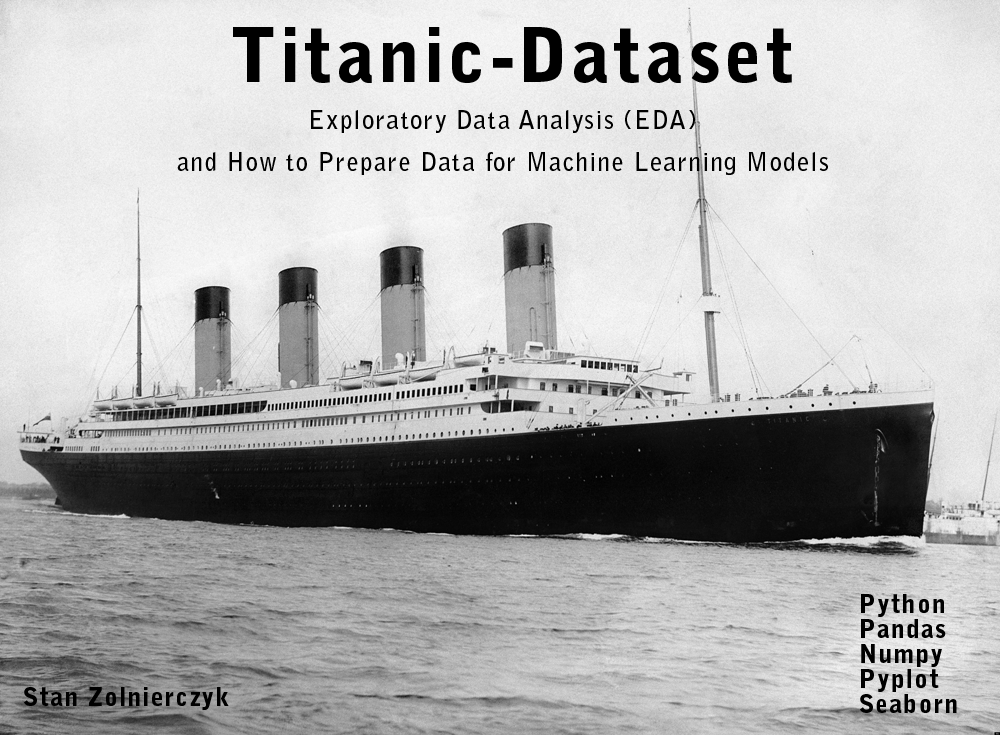
<style>
.page{position:relative;width:1000px;height:735px}
.page>*{position:absolute;margin:0}
.t1{font:75px "BellGothicStd-Black";letter-spacing:0.05em;color:#000000}
.t2{font:25px/41.7px "BellGothicStd-Bold";letter-spacing:0.05em;color:#000000}
.t3{font:25px/25px "BellGothicStd-Black";letter-spacing:0.05em;color:#000000}
.t4{font:25px "BellGothicStd-Black";letter-spacing:0.05em;color:#000000}
</style>
<div class="page">
<p class="t1" style="left:233px;top:27px;width:559px;height:56px">Titanic-Dataset</p>
<p class="t2" style="left:177px;top:110px;width:651px;height:65px;text-align:center">Exploratory Data Analysis (EDA)<br>and How to Prepare Data for Machine Learning Models</p>
<p class="t3" style="left:860px;top:594px;width:97px;height:119px">Python<br>Pandas<br>Numpy<br>Pyplot<br>Seaborn</p>
<p class="t4" style="left:24px;top:687px;width:205px;height:23px">Stan Zolnierczyk</p>
</div>
